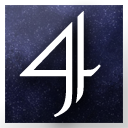
<style>
.page{position:relative;width:128px;height:128px}
.page>*{position:absolute;margin:0}
.t1{font:166.5px "ColonnaMT";color:#ffffff}
</style>
<div class="page">
<p class="t1" style="left:19px;top:11px;width:82px;height:106px">4</p>
</div>
